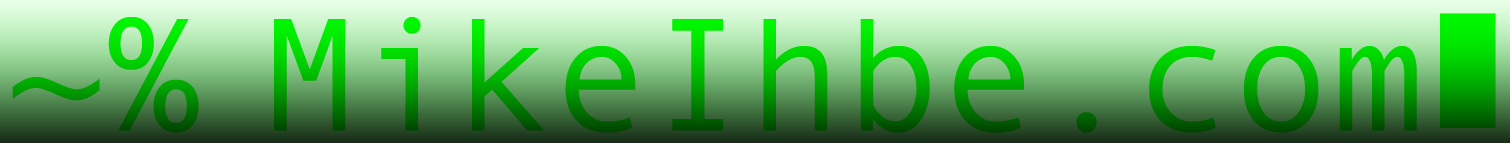
<style>
.page{position:relative;width:1510px;height:143px}
.page>*{position:absolute;margin:0}
.t1{font:277.8px "AndaleMono"}
</style>
<div class="page">
<p class="t1" style="left:12px;top:17px;width:1405px;height:116px">~% MikeIhbe.com</p>
</div>
